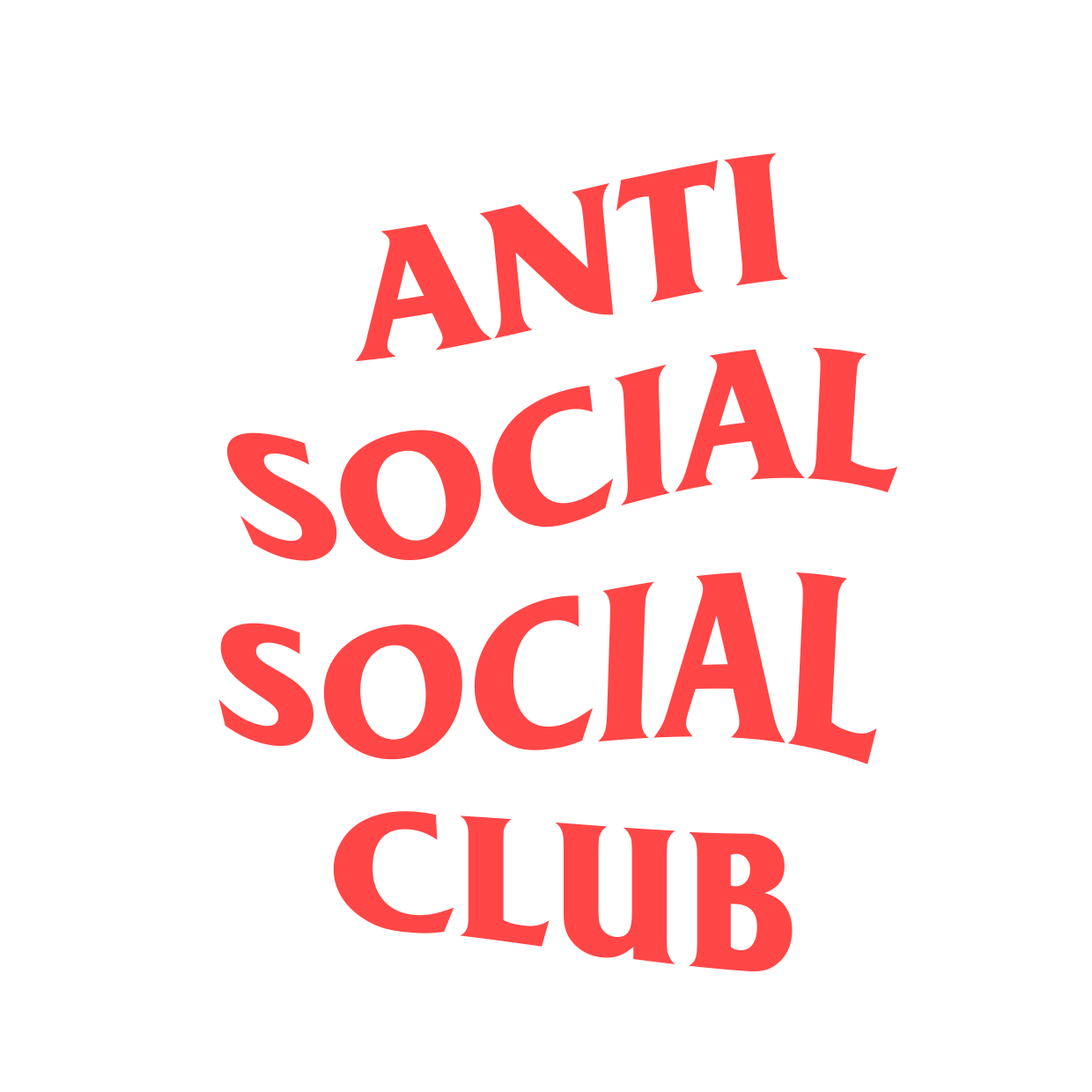
<style>
.page{position:relative;width:1092px;height:1092px;background:#ffffff}
.page>*{position:absolute;margin:0}
.t1{font:181.3px "FrizQua-Bold";color:#ff4747;scale:1.03 1}
.t2{font:181.3px "FrizQua-Bold";color:#ff4747}
.t3{font:208.6px "FrizQua-Bold";color:#ff4747;scale:0.86 1}
.t4{font:181.4px "FrizQua-Bold";color:#ff4747}
</style>
<div class="page">
<p class="t1" style="left:355px;top:153px;width:434px;height:209px;rotate:-5deg">ANTI</p>
<p class="t2" style="left:226px;top:347px;width:672px;height:214px;rotate:-5deg">SOCIAL</p>
<p class="t3" style="left:218px;top:572px;width:659px;height:192px;rotate:1deg">SOCIAL</p>
<p class="t4" style="left:333px;top:811px;width:460px;height:161px">CLUB</p>
</div>
